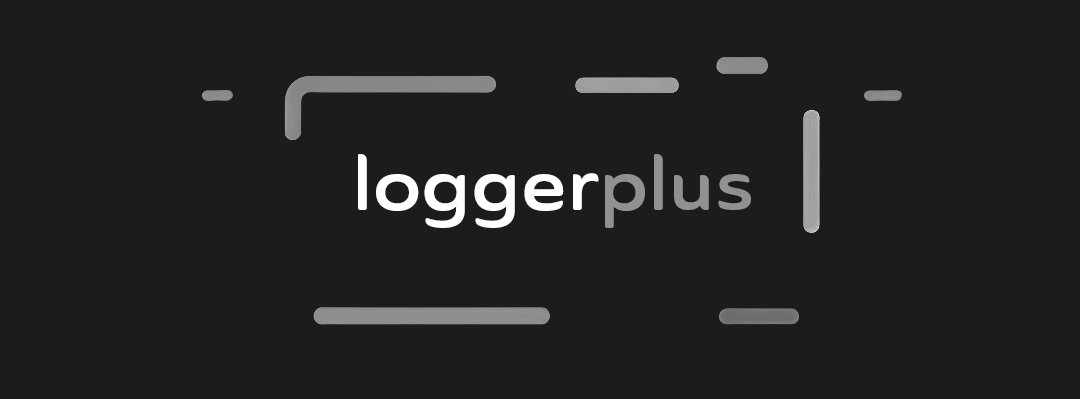
<style>
.page{position:relative;width:1080px;height:399px;background:#1c1c1d}
.page>*{position:absolute;margin:0}
.t1{font:76.5px "AinslieSans-ExtDem";color:#ffffff}
.t2{font:76.5px "AinslieSans-ExtDem";color:#919191}
</style>
<div class="page">
<p class="t1" style="left:358px;top:154px;width:393px;height:74px">logger<span class="t2">plus</span></p>
</div>
